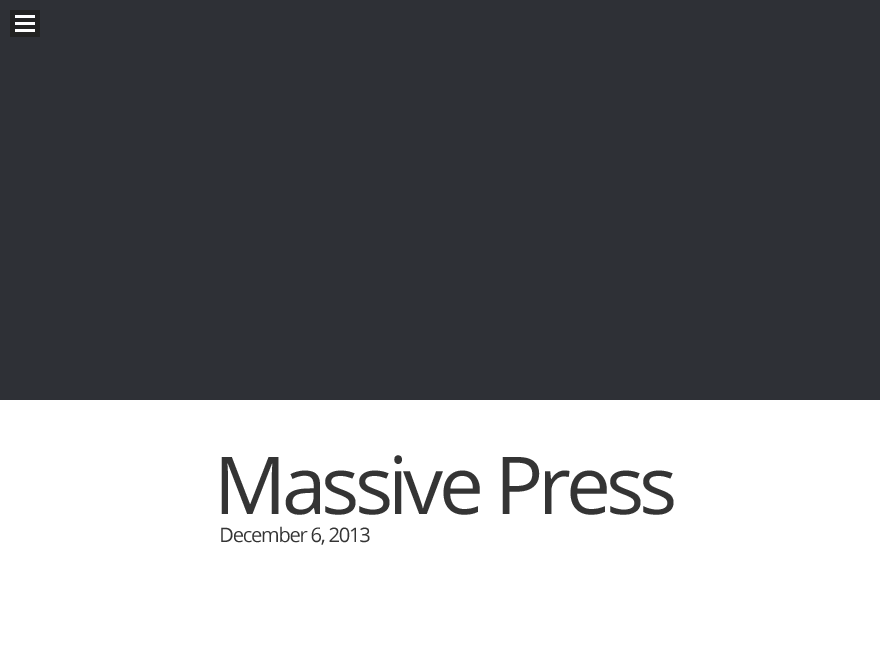
<style>
.page{position:relative;width:880px;height:660px;background:#2e3036}
.page>*{position:absolute;margin:0}
.t1{font:80px "OpenSans";letter-spacing:-0.06em;color:#343434}
.t2{font:20px "OpenSans";letter-spacing:-0.06em;color:#343434}
</style>
<div class="page">
<p class="t1" style="left:221px;top:455px;width:453px;height:60px">Massive Press</p>
<p class="t2" style="left:221px;top:526px;width:149px;height:19px">December 6, 2013</p>
</div>
